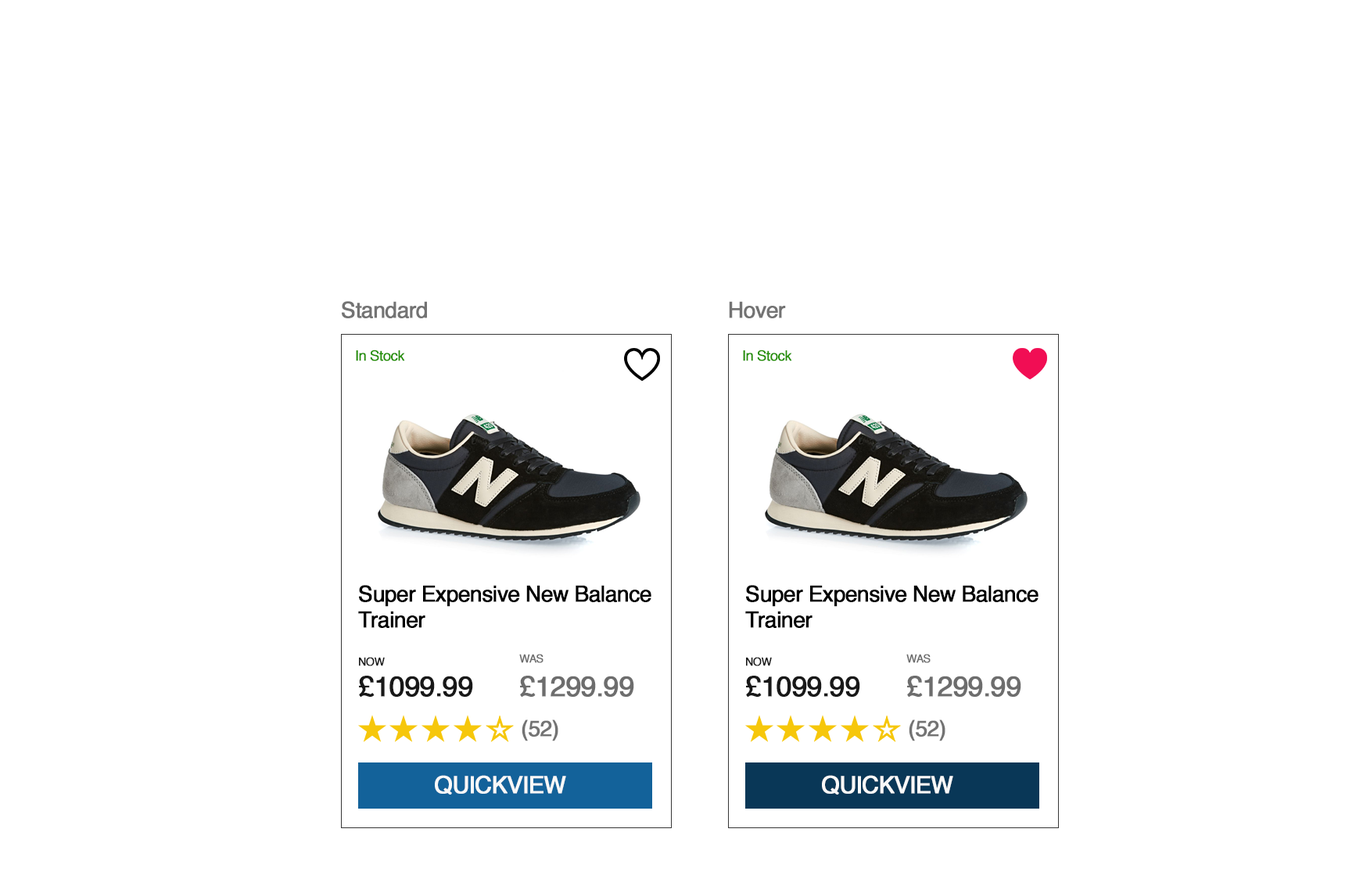
<style>
.page{position:relative;width:1356px;height:879px;background:#ffffff}
.page>*{position:absolute;margin:0}
.t1{font:21.9px "Helvetica";letter-spacing:-0.04em;color:#737373;font-weight:bold}
.t2{font:14.1px "Helvetica";letter-spacing:-0.04em;color:#249003;font-weight:bold}
.t3{font:21.9px "Helvetica";letter-spacing:-0.04em;color:#000000;font-weight:bold}
.t4{font:11px "Helvetica";letter-spacing:-0.04em;color:#6d6d6d;font-weight:bold}
.t5{font:11px "Helvetica";letter-spacing:-0.04em;color:#181818;font-weight:bold}
.t6{font:28.2px "Helvetica";letter-spacing:-0.04em;color:#181818;font-weight:bold}
.t7{font:28.2px "Helvetica";letter-spacing:-0.04em;color:#6d6d6d;font-weight:bold}
.t8{font:23.5px "Helvetica";letter-spacing:-0.04em;color:#f8f8f8;font-weight:bold}
</style>
<div class="page">
<p class="t1" style="left:342px;top:301px;width:85px;height:17px">Standard</p>
<p class="t1" style="left:729px;top:301px;width:57px;height:17px">Hover</p>
<p class="t2" style="left:356px;top:350px;width:49px;height:11px">In Stock</p>
<p class="t2" style="left:743px;top:350px;width:49px;height:11px">In Stock</p>
<p class="t3" style="left:358px;top:585px;width:294px;height:43px">Super Expensive New Balance Trainer</p>
<p class="t3" style="left:745px;top:585px;width:294px;height:43px">Super Expensive New Balance Trainer</p>
<p class="t4" style="left:519px;top:654px;width:25px;height:9px">WAS</p>
<p class="t4" style="left:907px;top:654px;width:24px;height:9px">WAS</p>
<p class="t5" style="left:359px;top:657px;width:26px;height:9px">NOW</p>
<p class="t5" style="left:746px;top:657px;width:26px;height:9px">NOW</p>
<p class="t6" style="left:359px;top:676px;width:114px;height:21px">£1099.99</p>
<p class="t7" style="left:520px;top:676px;width:114px;height:21px">£1299.99</p>
<p class="t6" style="left:746px;top:676px;width:114px;height:21px">£1099.99</p>
<p class="t7" style="left:907px;top:676px;width:115px;height:21px">£1299.99</p>
<p class="t1" style="left:522px;top:720px;width:36px;height:22px">(52)</p>
<p class="t1" style="left:909px;top:720px;width:37px;height:22px">(52)</p>
<p class="t8" style="left:435px;top:775px;width:131px;height:20px">QUICKVIEW</p>
<p class="t8" style="left:822px;top:775px;width:131px;height:20px">QUICKVIEW</p>
</div>
